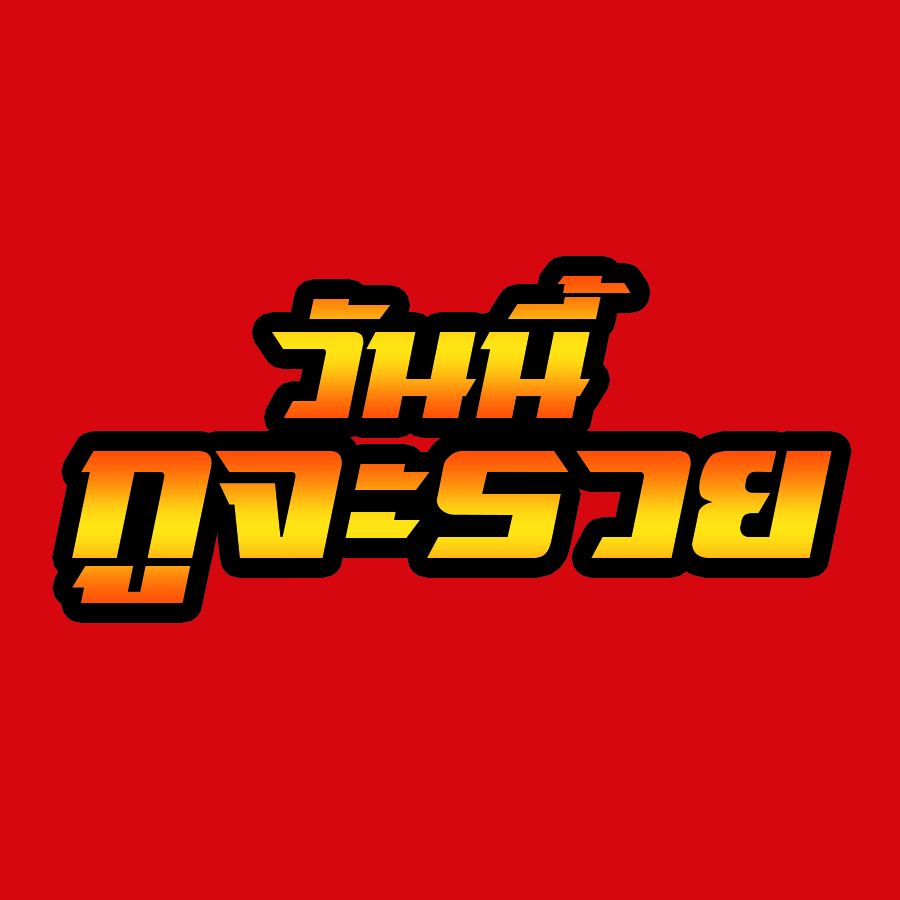
<style>
.page{position:relative;width:900px;height:900px;background:#d7070f}
.page>*{position:absolute;margin:0}
.t1{font:200px "sdrangverV.1-Regular"}
.t2{font:250px "sdrangverV.1-Regular"}
</style>
<div class="page">
<p class="t1" style="left:271px;top:275px;width:360px;height:143px">วันนี้</p>
<p class="t2" style="left:72px;top:451px;width:760px;height:152px">กูจะรวย</p>
</div>
